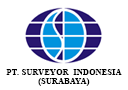
<style>
.page{position:relative;width:128px;height:90px;background:#ffffff}
.page>*{position:absolute;margin:0}
.t1{font:7.9px "TimesNewRomanPS-BoldMT";letter-spacing:0.05em;color:#000000}
</style>
<div class="page">
<p class="t1" style="left:6px;top:69px;width:116px;height:17px;text-align:center">PT. SURVEYOR  INDONESIA<br>(SURABAYA)</p>
</div>
